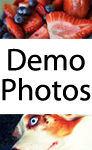
<style>
.page{position:relative;width:92px;height:150px;background:#ffffff}
.page>*{position:absolute;margin:0}
.t1{font:31.3px/30px "MyriadPro-Regular";color:#000000}
</style>
<div class="page">
<p class="t1" style="left:2px;top:48px;width:89px;height:53px;text-align:center">Demo<br>Photos</p>
</div>
